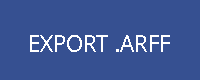
<style>
.page{position:relative;width:200px;height:80px;background:#365091}
.page>*{position:absolute;margin:0}
.t1{font:23px "DroidSans";color:#ffffff}
</style>
<div class="page">
<p class="t1" style="left:30px;top:35px;width:140px;height:17px">EXPORT .ARFF</p>
</div>
